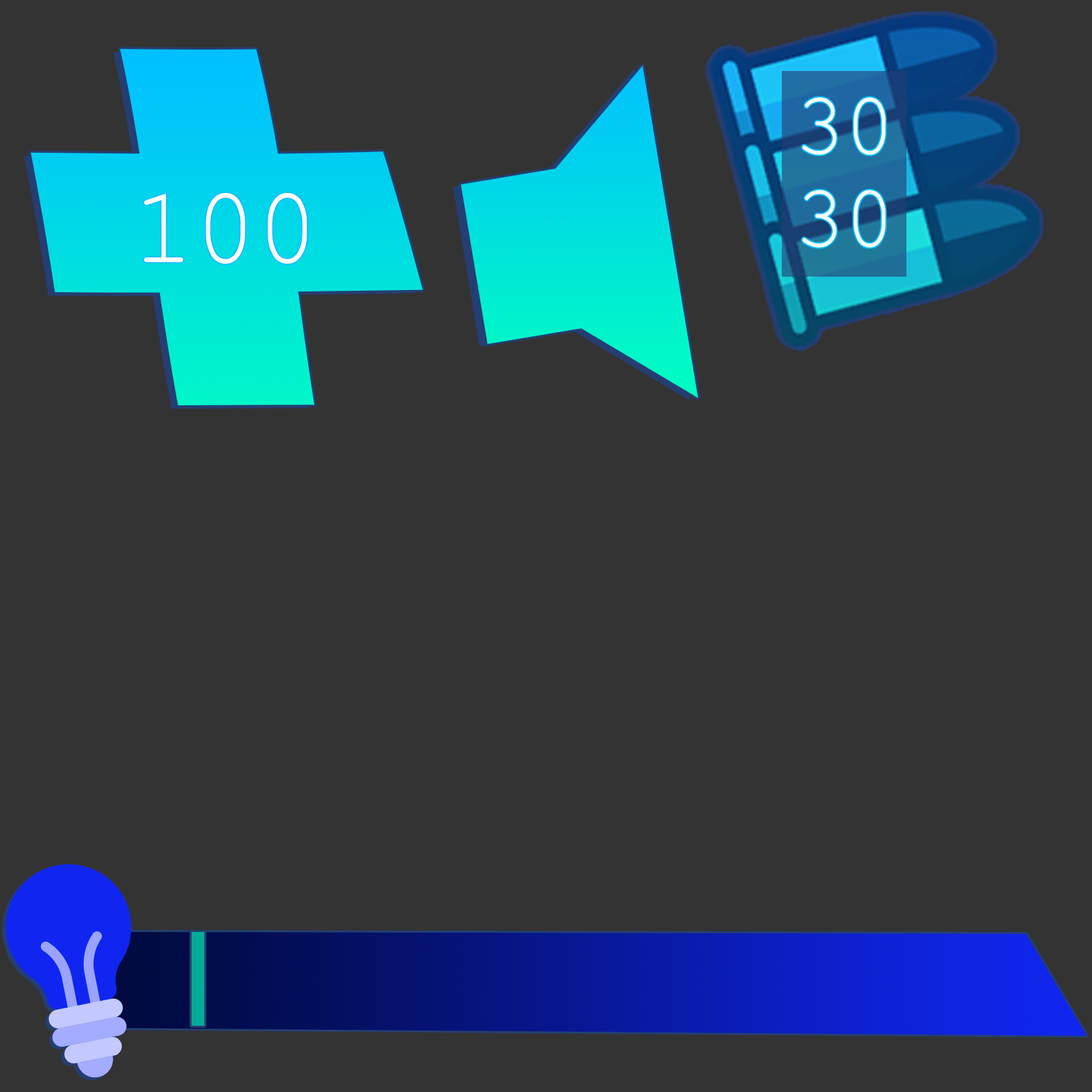
<style>
.page{position:relative;width:1092px;height:1092px;background:#333333}
.page>*{position:absolute;margin:0}
.t1{font:88.9px "CourierNewPSMT";color:#ffffff;scale:0.94 1}
.t2{font:109.9px "CourierNewPSMT";color:#ffffff;scale:0.94 1}
</style>
<div class="page">
<p class="t1" style="left:802px;top:97px;width:84px;height:58px">30</p>
<p class="t2" style="left:144px;top:193px;width:163px;height:71px">100</p>
<p class="t1" style="left:802px;top:190px;width:84px;height:58px">30</p>
</div>
